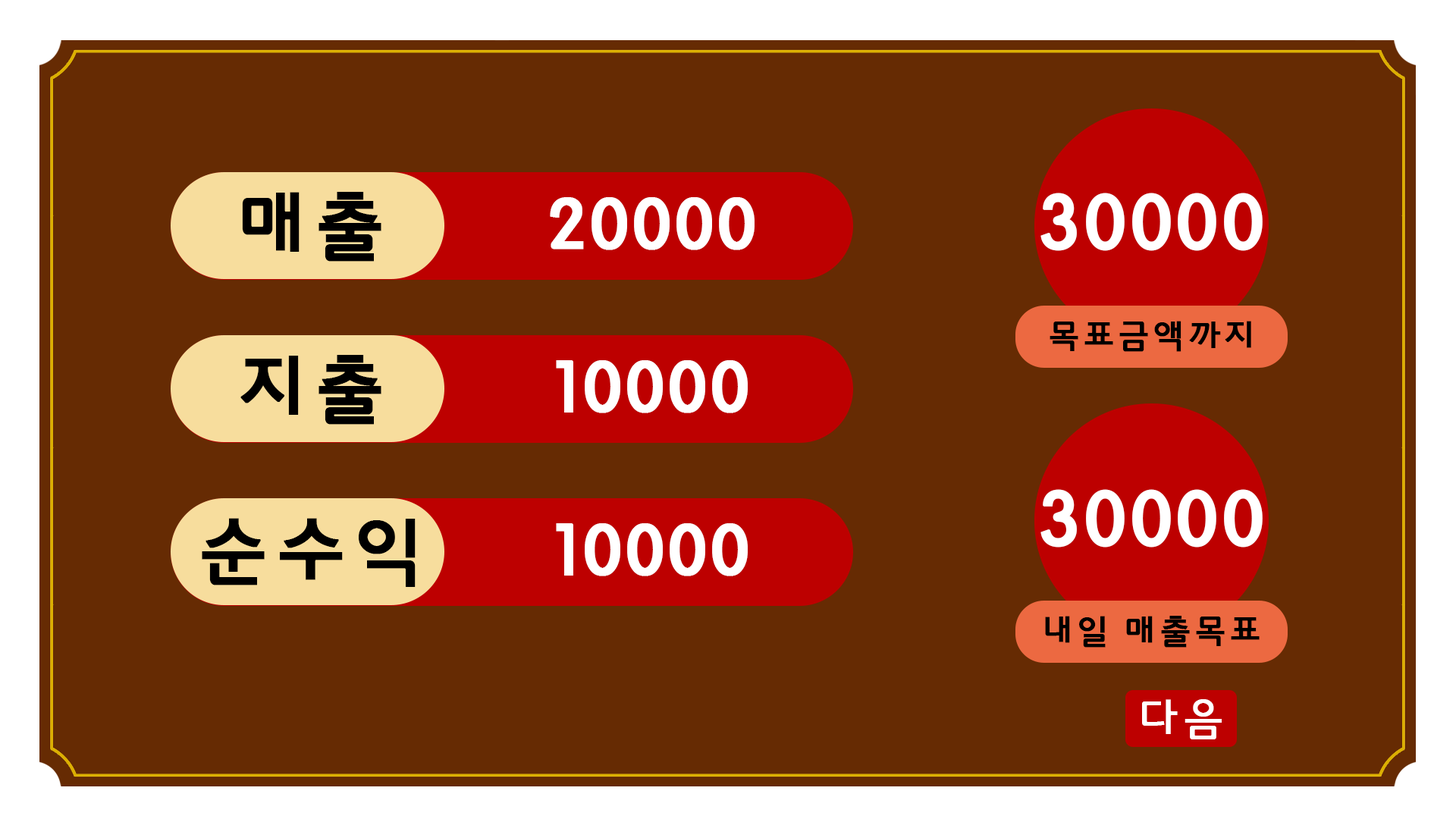
<style>
.page{position:relative;width:1456px;height:819px;background:#662b03}
.page>*{position:absolute;margin:0}
.t1{font:75.8px "HYkanB";color:#000000;font-weight:bold}
.t2{font:75.8px "HYkanB";color:#ffffff;font-weight:bold}
.t3{font:81.9px "HYkanB";color:#ffffff;font-weight:bold}
.t4{font:34.1px "HYkanB";color:#000000;font-weight:bold}
.t5{font:44.2px "HYkanM";color:#ffffff;font-weight:bold}
</style>
<div class="page">
<p class="t1" style="left:242px;top:192px;width:139px;height:70px">매출</p>
<p class="t2" style="left:550px;top:197px;width:205px;height:53px">20000</p>
<p class="t3" style="left:1040px;top:193px;width:223px;height:58px">30000</p>
<p class="t4" style="left:1050px;top:321px;width:201px;height:31px">목표금액까지</p>
<p class="t1" style="left:240px;top:355px;width:141px;height:70px">지출</p>
<p class="t2" style="left:556px;top:360px;width:192px;height:53px">10000</p>
<p class="t3" style="left:1040px;top:489px;width:223px;height:59px">30000</p>
<p class="t1" style="left:202px;top:518px;width:214px;height:69px">순수익</p>
<p class="t2" style="left:556px;top:523px;width:192px;height:53px">10000</p>
<p class="t4" style="left:1045px;top:616px;width:215px;height:32px">내일 매출목표</p>
<p class="t5" style="left:1142px;top:699px;width:80px;height:40px">다음</p>
</div>
